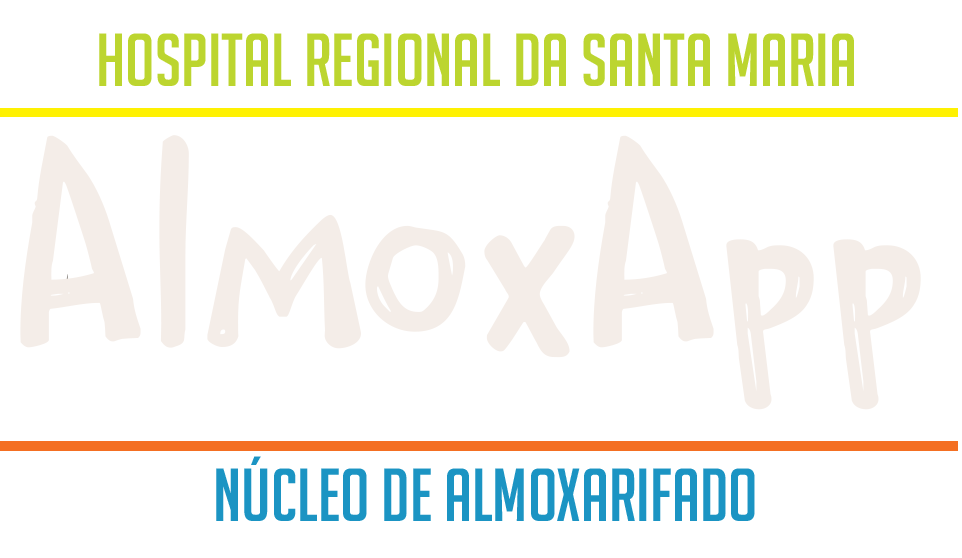
<style>
.page{position:relative;width:962px;height:558px;background:#ffffff}
.page>*{position:absolute;margin:0}
.t1{font:73.2px "BigNoodleTitling";color:#bcd52f}
.t2{font:312.9px "ScribbleNoteDEMO-Regular";color:#f4ede8}
.t3{font:73.2px "BigNoodleTitling";color:#1b94c3}
</style>
<div class="page">
<p class="t1" style="left:99px;top:33px;width:755px;height:53px">HOSPITAL REGIONAL DA SANTA MARIA</p>
<p class="t2" style="left:20px;top:135px;width:901px;height:275px">AlmoxApp</p>
<p class="t3" style="left:216px;top:456px;width:539px;height:65px">NÚCLEO DE ALMOXARIFADO</p>
</div>
